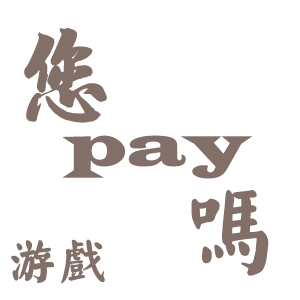
<style>
.page{position:relative;width:300px;height:300px;background:#ffffff}
.page>*{position:absolute;margin:0}
.t1{font:60px "LatinWide";color:#816f68}
.t2{font:100px "LatinWide";color:#816f68}
.t3{font:100px "HYx4gf";color:#816f68}
.t4{font:50px "HYx4gf";color:#816f68}
</style>
<div class="page">
<p class="t1" style="left:62px;top:135px;width:191px;height:44px">pay<span class="t2">y</span></p>
<p class="t3" style="left:191px;top:190px;width:78px;height:86px">吗</p>
<p class="t4" style="left:11px;top:239px;width:94px;height:45px">游戏</p>
</div>
